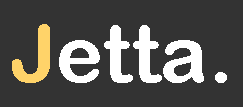
<style>
.page{position:relative;width:243px;height:107px;background:#333333}
.page>*{position:absolute;margin:0}
.t1{font:80px "ArialRoundedMTBold";color:#ffffff}
.t2{font:80px "ArialRoundedMTBold";color:#ffd369}
</style>
<div class="page">
<p class="t1" style="left:12px;top:24px;width:215px;height:59px"><span class="t2">J</span>etta.</p>
</div>
